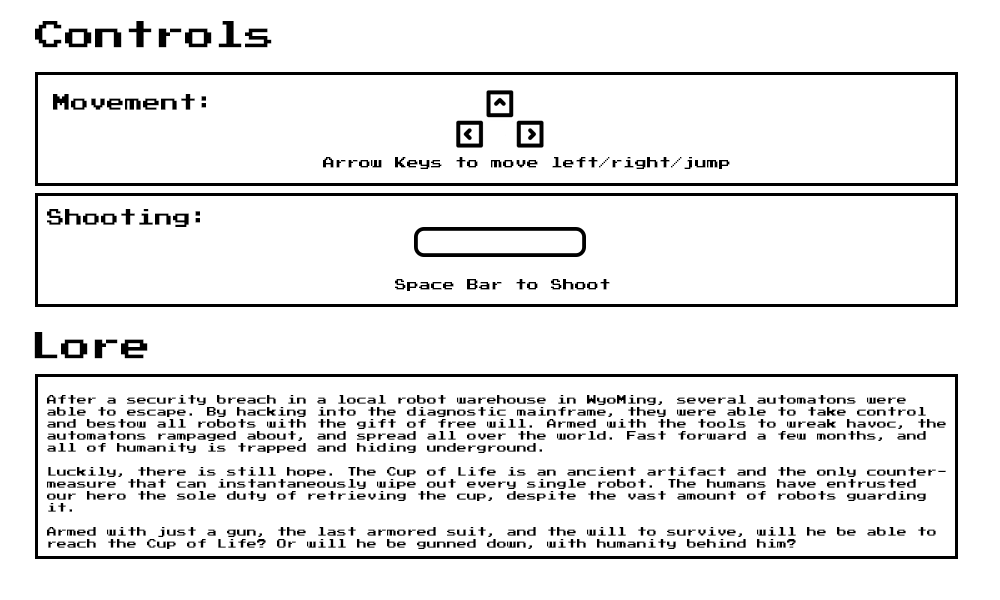
<style>
.page{position:relative;width:1000px;height:600px;background:#ffffff}
.page>*{position:absolute;margin:0}
.t1{font:30px "PressStart2P";color:#000000}
.t2{font:12px "PressStart2P";color:#000000}
.t3{font:18px "PressStart2P";color:#000000}
.t4{font:12px "PressStart2P";color:#ffffff}
.t5{font:10px "PressStart2P";color:#000000}
</style>
<div class="page">
<p class="t1" style="left:35px;top:21px;width:237px;height:27px">Controls</p>
<p class="t2" style="left:53px;top:94px;width:677px;height:75px"><span class="t3"><br> Movement:<br> <br> <br></span>         Arrow Keys to move left/right/jump</p>
<p class="t2" style="left:47px;top:209px;width:563px;height:82px"><span class="t4"><br> </span><span class="t3">Shooting:<br><br><br>          </span>Space Bar to Shoot</p>
<p class="t1" style="left:34px;top:332px;width:114px;height:27px">Lore</p>
<p class="t5" style="left:47px;top:395px;width:899px;height:154px">After a security breach in a local robot warehouse in WyoMing, several automatons were able to escape. By hacking into the diagnostic mainframe, they were able to take control and bestow all robots with the gift of free will. Armed with the tools to wreak havoc, the automatons rampaged about, and spread all over the world. Fast forward a few months, and all of humanity is trapped and hiding underground.<br><br>Luckily, there is still hope. The Cup of Life is an ancient artifact and the only countermeasure that can instantaneously wipe out every single robot. The humans have entrusted our hero the sole duty of retrieving the cup, despite the vast amount of robots guarding it.<br><br>Armed with just a gun, the last armored suit, and the will to survive, will he be able to reach the Cup of Life? Or will he be gunned down, with humanity behind him?</p>
</div>
